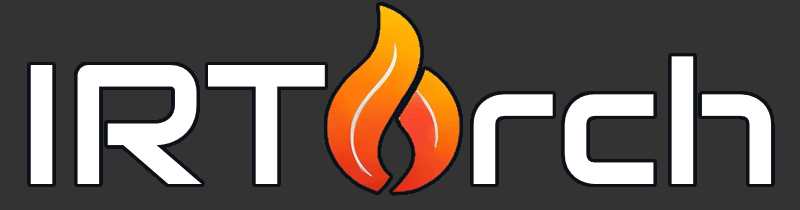
<style>
.page{position:relative;width:800px;height:210px;background:#333333}
.page>*{position:absolute;margin:0}
.t1{font:170px "Audiowide-Regular";color:#ffffff}
.t2{font:170px "Audiowide-Regular";color:#0d1117}
</style>
<div class="page">
<p class="t1" style="left:30px;top:64px;width:295px;height:120px"><span class="t2">I</span>RT</p>
<p class="t1" style="left:473px;top:56px;width:299px;height:128px">rch</p>
</div>
